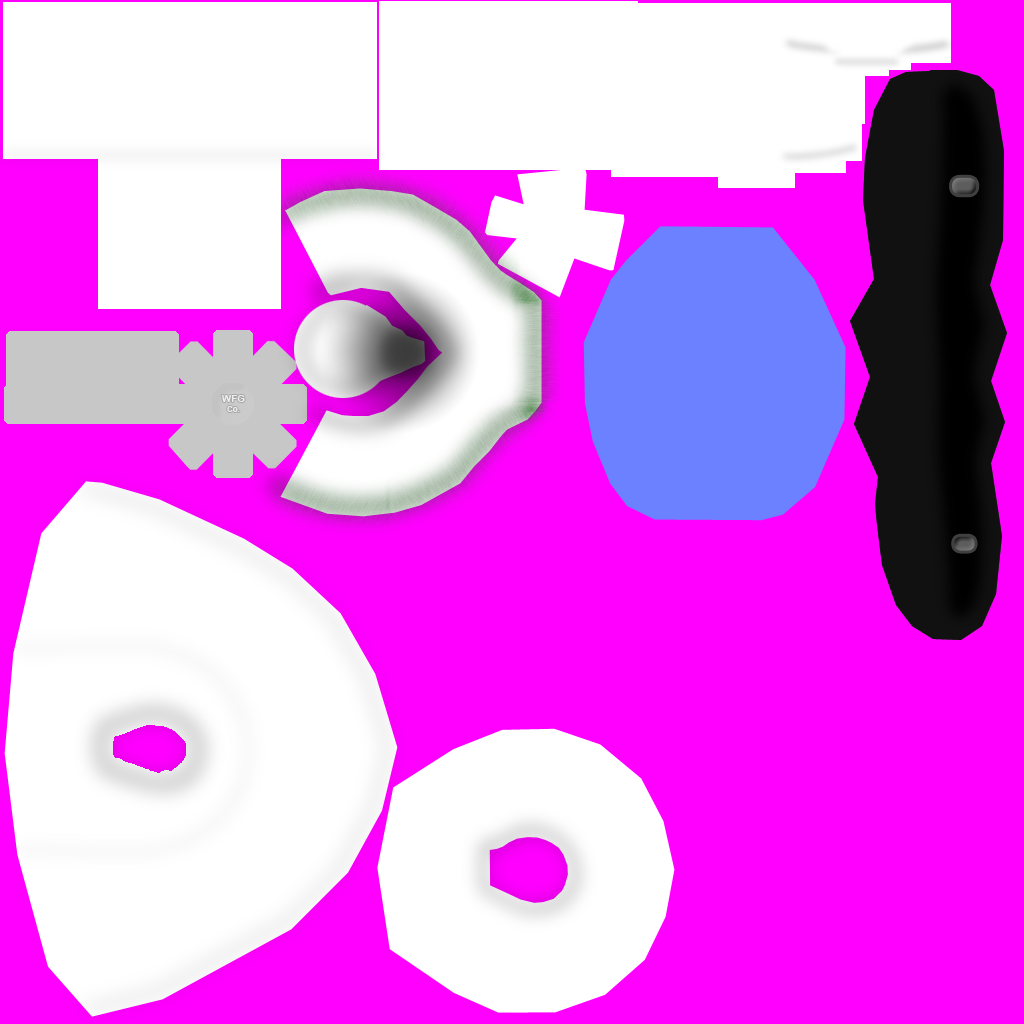
<style>
.page{position:relative;width:1024px;height:1024px;background:#ff00ff}
.page>*{position:absolute;margin:0}
.t1{font:10px "Arial-BoldMT";color:#eeeeee}
.t2{font:8px "Arial-BoldMT";color:#eeeeee}
</style>
<div class="page">
<p class="t1" style="left:221px;top:395px;width:24px;height:17px;text-align:center">WFG<br><span class="t2">Co.</span></p>
</div>
